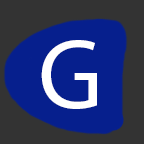
<style>
.page{position:relative;width:144px;height:144px;background:#061f8d}
.page>*{position:absolute;margin:0}
.t1{font:100px "MyriadPro-Regular";color:#ffffff}
</style>
<div class="page">
<p class="t1" style="left:41px;top:40px;width:56px;height:69px">G</p>
</div>
